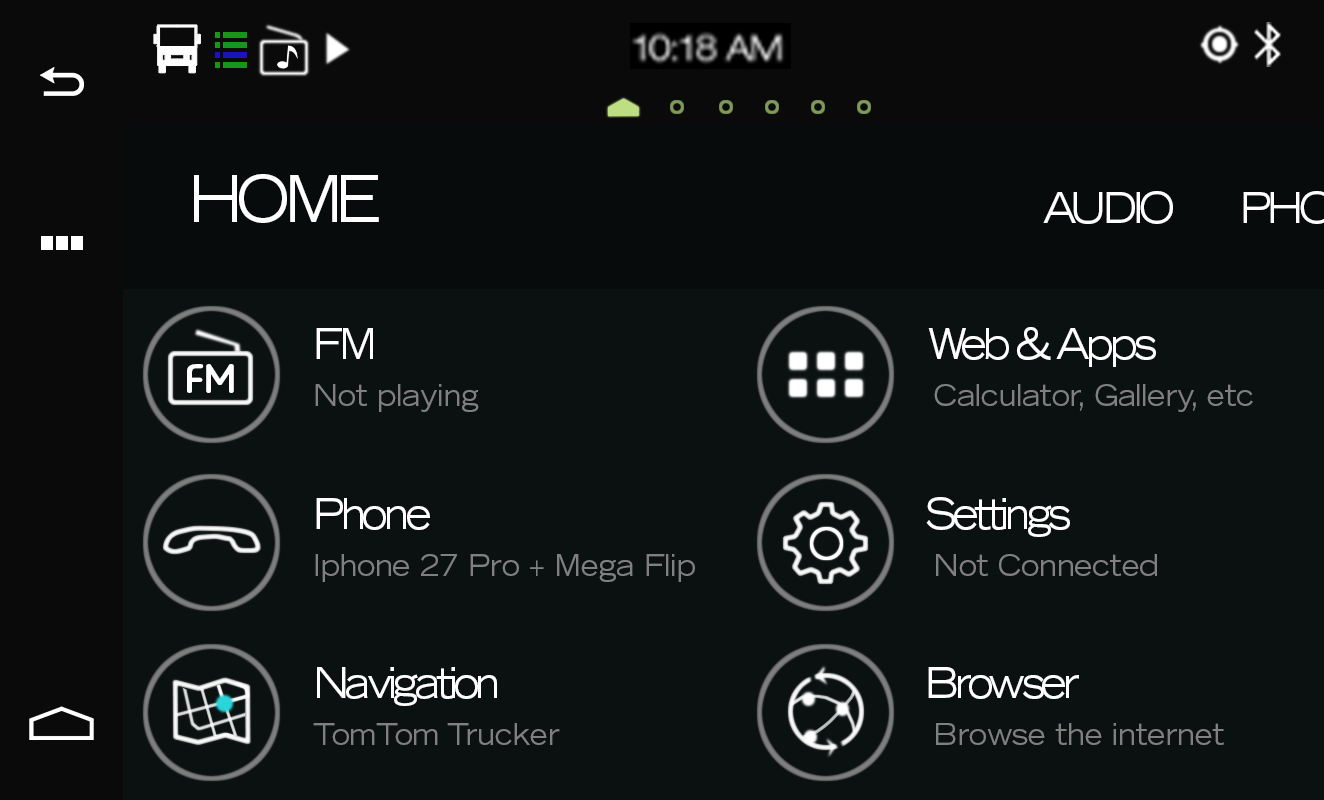
<style>
.page{position:relative;width:1324px;height:800px;background:#0b1111}
.page>*{position:absolute;margin:0}
.t1{font:64.8px "TradeGothicLTStd-Extended";letter-spacing:-0.1em;color:#ffffff;scale:0.89 1}
.t2{font:43px "TradeGothicLTStd-Extended";letter-spacing:-0.1em;color:#ffffff;scale:0.89 1}
.t3{font:46px "AncaMedium";color:#ffffff;scale:1.13 1}
.t4{font:30px "TradeGothicLTStd-Extended";color:#808080;scale:0.89 1}
</style>
<div class="page">
<p class="t1" style="left:194px;top:174px;width:185px;height:49px">HOME</p>
<p class="t2" style="left:1043px;top:191px;width:130px;height:33px">AUDIO</p>
<p class="t2" style="left:316px;top:328px;width:57px;height:31px">FM</p>
<p class="t2" style="left:928px;top:327px;width:228px;height:40px">Web &amp; Apps</p>
<p class="t3" style="left:187px;top:364px;width:47px;height:29px">FM</p>
<p class="t4" style="left:315px;top:384px;width:164px;height:28px">Not playing</p>
<p class="t4" style="left:934px;top:384px;width:319px;height:28px">Calculator, Gallery, etc</p>
<p class="t2" style="left:926px;top:497px;width:144px;height:40px">Settings</p>
<p class="t2" style="left:316px;top:498px;width:114px;height:32px">Phone</p>
<p class="t4" style="left:315px;top:554px;width:380px;height:28px">Iphone 27 Pro + Mega Flip</p>
<p class="t4" style="left:936px;top:554px;width:221px;height:22px">Not Connected</p>
<p class="t2" style="left:317px;top:667px;width:180px;height:39px">Navigation</p>
<p class="t2" style="left:928px;top:667px;width:151px;height:32px">Browser</p>
<p class="t4" style="left:313px;top:723px;width:247px;height:22px">TomTom Trucker</p>
<p class="t4" style="left:936px;top:723px;width:288px;height:22px">Browse the internet</p>
</div>
